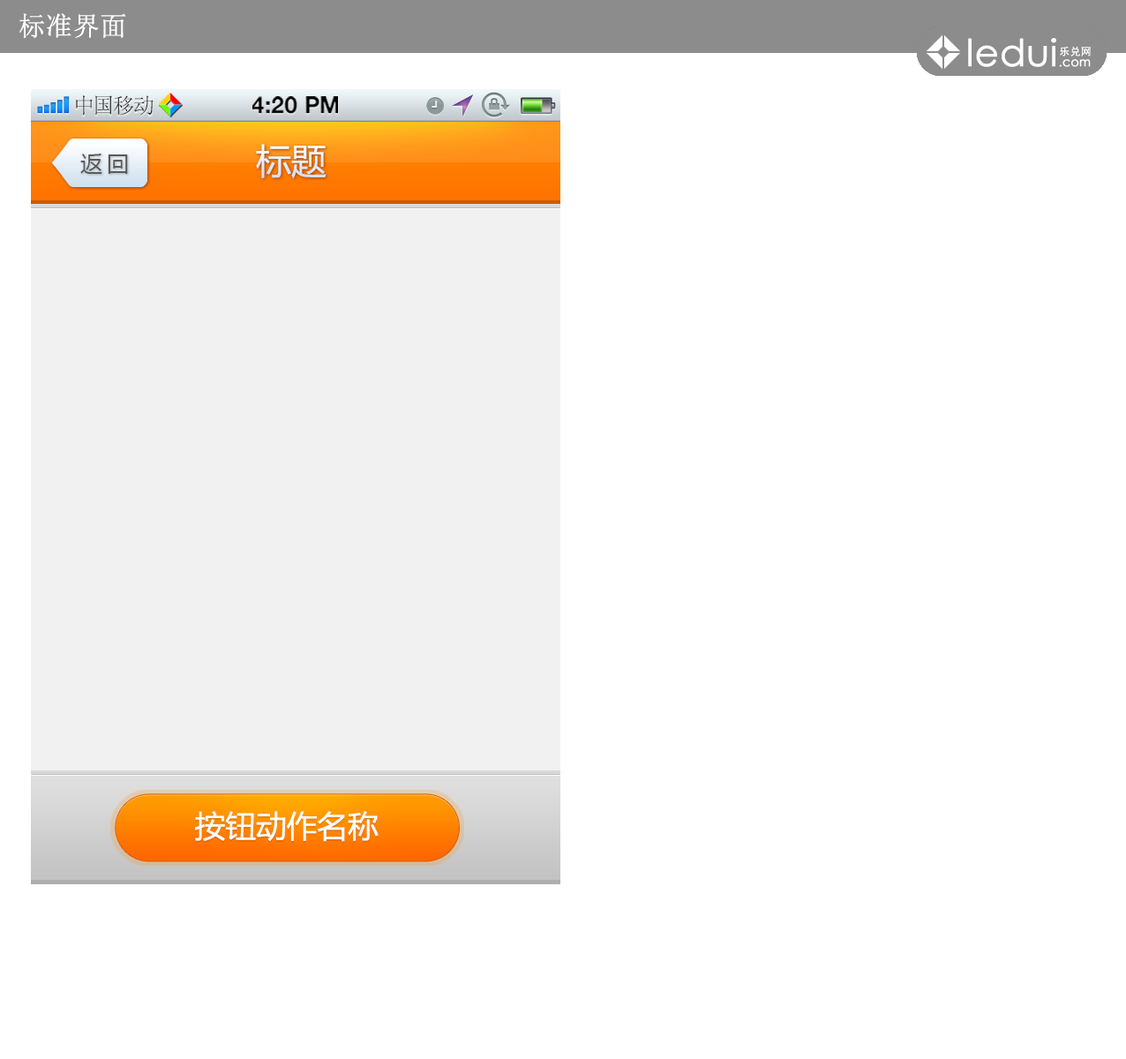
<style>
.page{position:relative;width:1126px;height:1059px;background:#ffffff}
.page>*{position:absolute;margin:0}
.t1{font:26.5px "SimSun";color:#ffffff;font-weight:bold}
.t2{font:21.5px "SimSun";color:#414141}
.t3{font:23.1px "HelveticaNeue-Bold";color:#000000;text-transform:uppercase}
.t4{font:35.3px "MicrosoftYaHei";color:#e8f0f7}
.t5{font:22.1px "MicrosoftYaHei";letter-spacing:0.2em;color:#5b5b5b}
.t6{font:30.6px "MicrosoftYaHei";color:#ffffff}
</style>
<div class="page">
<p class="t1" style="left:19px;top:13px;width:107px;height:26px">标准界面</p>
<p class="t2" style="left:76px;top:95px;width:78px;height:21px">中国移动</p>
<p class="t3" style="left:252px;top:96px;width:86px;height:18px">4:20 PM</p>
<p class="t4" style="left:256px;top:144px;width:71px;height:35px">标题</p>
<p class="t5" style="left:80px;top:154px;width:48px;height:20px">返回</p>
<p class="t6" style="left:195px;top:811px;width:184px;height:31px">按钮动作名称</p>
</div>
